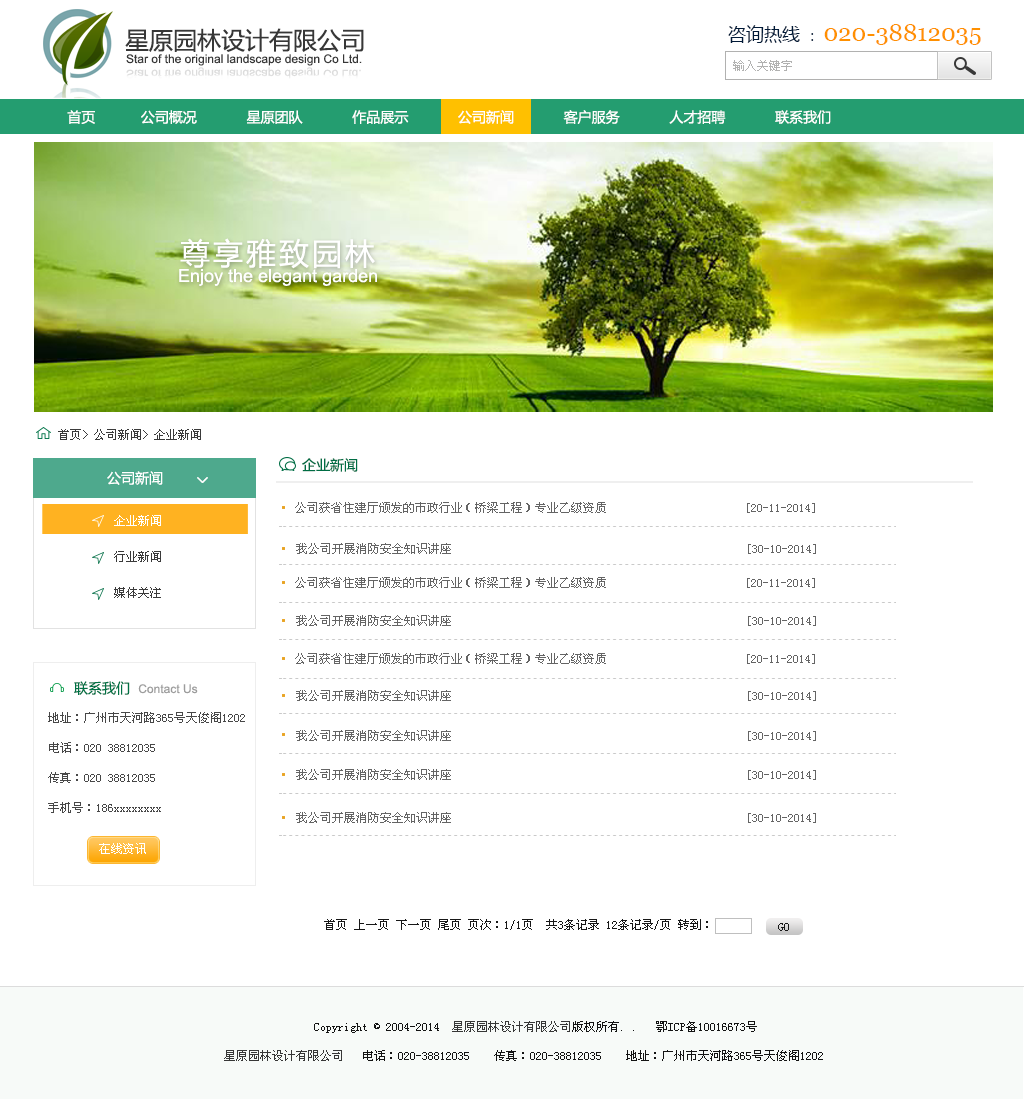
<style>
.page{position:relative;width:1024px;height:1099px;background:#ffffff}
.page>*{position:absolute;margin:0}
.t1{font:24px "MicrosoftYaHei";color:#373737}
.t2{font:24px "Georgia";color:#ff9000}
.t3{font:18px "MicrosoftYaHei";color:#001937}
.t4{font:14px "MicrosoftYaHei";color:#001937}
.t5{font:12px "ArialMT";color:#373737}
.t6{font:12px "SimSun";color:#b1b1b0}
.t7{font:11.8px "ArialMT";color:#dcdcdc}
.t8{font:14px "MicrosoftYaHei";color:#ffffff}
.t9{font:30px "MicrosoftYaHei";letter-spacing:0.1em;color:#ffffff}
.t10{font:18px "ArialMT";color:#ffffff}
.t11{font:12px "SimSun";color:#3a3a3a}
.t12{font:14px "MicrosoftYaHei";color:#006d44}
.t13{font:12px "SimSun";color:#646464}
.t14{font:12px/36px "SimSun";color:#3a3a3a}
.t15{font:12px/36px "SimSun";color:#ffffff}
.t16{font:12px "ArialMT";color:#9c9c9c}
.t17{font:14px "MicrosoftYaHei";color:#007245}
.t18{font:12px/30px "SimSun";color:#474747}
.t19{font:12px "SimSun";color:#ffffff}
.t20{font:12px "SimSun";color:#171717}
.t21{font:12px "SimSun";color:#131313}
.t22{font:12px "SimSun";color:#373737}
</style>
<div class="page">
<p class="t1" style="left:125px;top:28px;width:239px;height:24px">星原园林设计有限公司</p>
<p class="t2" style="left:728px;top:24px;width:253px;height:21px"><span class="t3">咨询热线 </span><span class="t4">： </span>020-38812035</p>
<p class="t5" style="left:126px;top:54px;width:236px;height:12px">Star of the original landscape design Co Ltd.</p>
<p class="t6" style="left:733px;top:60px;width:59px;height:11px">输入关键字</p>
<p class="t7" style="left:126px;top:67px;width:235px;height:12px">Star of the original landscape design Co Ltd.</p>
<p class="t8" style="left:67px;top:110px;width:764px;height:14px">首页           公司概况            星原团队            作品展示            公司新闻            客户服务            人才招聘            联系我们</p>
<p class="t9" style="left:180px;top:238px;width:195px;height:31px">尊享雅致园林</p>
<p class="t10" style="left:179px;top:269px;width:198px;height:17px">Enjoy the elegant garden</p>
<p class="t11" style="left:58px;top:429px;width:143px;height:11px">首页&gt; 公司新闻&gt; 企业新闻</p>
<p class="t12" style="left:302px;top:458px;width:56px;height:14px">企业新闻</p>
<p class="t8" style="left:107px;top:471px;width:56px;height:14px">公司新闻</p>
<p class="t13" style="left:295px;top:502px;width:520px;height:11px">公司获省住建厅颁发的市政行业（桥梁工程）专业乙级资质                       [20-11-2014]</p>
<p class="t14" style="left:114px;top:515px;width:47px;height:83px;text-align:justify"><span class="t15">企业新闻<br></span>行业新闻<br>媒体关注</p>
<p class="t13" style="left:296px;top:543px;width:520px;height:11px">我公司开展消防安全知识讲座                                                 [30-10-2014]</p>
<p class="t13" style="left:295px;top:577px;width:520px;height:11px">公司获省住建厅颁发的市政行业（桥梁工程）专业乙级资质                       [20-11-2014]</p>
<p class="t13" style="left:296px;top:615px;width:520px;height:11px">我公司开展消防安全知识讲座                                                 [30-10-2014]</p>
<p class="t13" style="left:295px;top:653px;width:520px;height:11px">公司获省住建厅颁发的市政行业（桥梁工程）专业乙级资质                       [20-11-2014]</p>
<p class="t16" style="left:74px;top:681px;width:124px;height:14px"><span class="t17">联系我们  </span>Contact Us</p>
<p class="t13" style="left:296px;top:690px;width:520px;height:11px">我公司开展消防安全知识讲座                                                 [30-10-2014]</p>
<p class="t18" style="left:48px;top:712px;width:197px;height:101px;text-align:justify">地址：广州市天河路365号天俊阁1202<br>电话：020 38812035<br>传真：020 38812035<br>手机号：186xxxxxxxx</p>
<p class="t13" style="left:296px;top:730px;width:520px;height:11px">我公司开展消防安全知识讲座                                                 [30-10-2014]</p>
<p class="t13" style="left:296px;top:769px;width:520px;height:11px">我公司开展消防安全知识讲座                                                 [30-10-2014]</p>
<p class="t13" style="left:296px;top:812px;width:520px;height:11px">我公司开展消防安全知识讲座                                                 [30-10-2014]</p>
<p class="t19" style="left:99px;top:843px;width:47px;height:11px">在线资讯</p>
<p class="t20" style="left:324px;top:919px;width:384px;height:11px">首页 上一页 下一页 尾页 页次：1/1页  共3条记录 12条记录/页 转到：</p>
<p class="t20" style="left:778px;top:923px;width:11px;height:8px">GO</p>
<p class="t21" style="left:314px;top:1021px;width:443px;height:12px">Copyright © 2004-2014  <span class="t22">星原园林设计有限公司</span>版权所有. .   鄂ICP备10016673号</p>
<p class="t21" style="left:224px;top:1050px;width:599px;height:11px"><span class="t22">星原园林设计有限公司</span>   电话：020-38812035    传真：020-38812035    地址：广州市天河路365号天俊阁1202</p>
</div>
